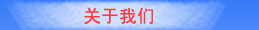
<style>
.page{position:relative;width:259px;height:30px}
.page>*{position:absolute;margin:0}
.t1{font:18px "SimHei";color:#f73d3d}
</style>
<div class="page">
<p class="t1" style="left:84px;top:7px;width:70px;height:18px">关于我们</p>
</div>
